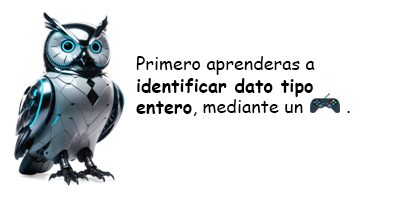
<style>
.page{position:relative;width:400px;height:200px;background:#ffffff}
.page>*{position:absolute;margin:0}
.t1{font:18px "ComicSansMS-Bold";color:#000000}
.t2{font:18px "ComicSansMS";color:#000000}
</style>
<div class="page">
<p class="t1" style="left:136px;top:56px;width:214px;height:60px"><span class="t2">Primero aprenderas a </span>identificar dato tipo entero<span class="t2">, mediante un        .</span></p>
</div>
